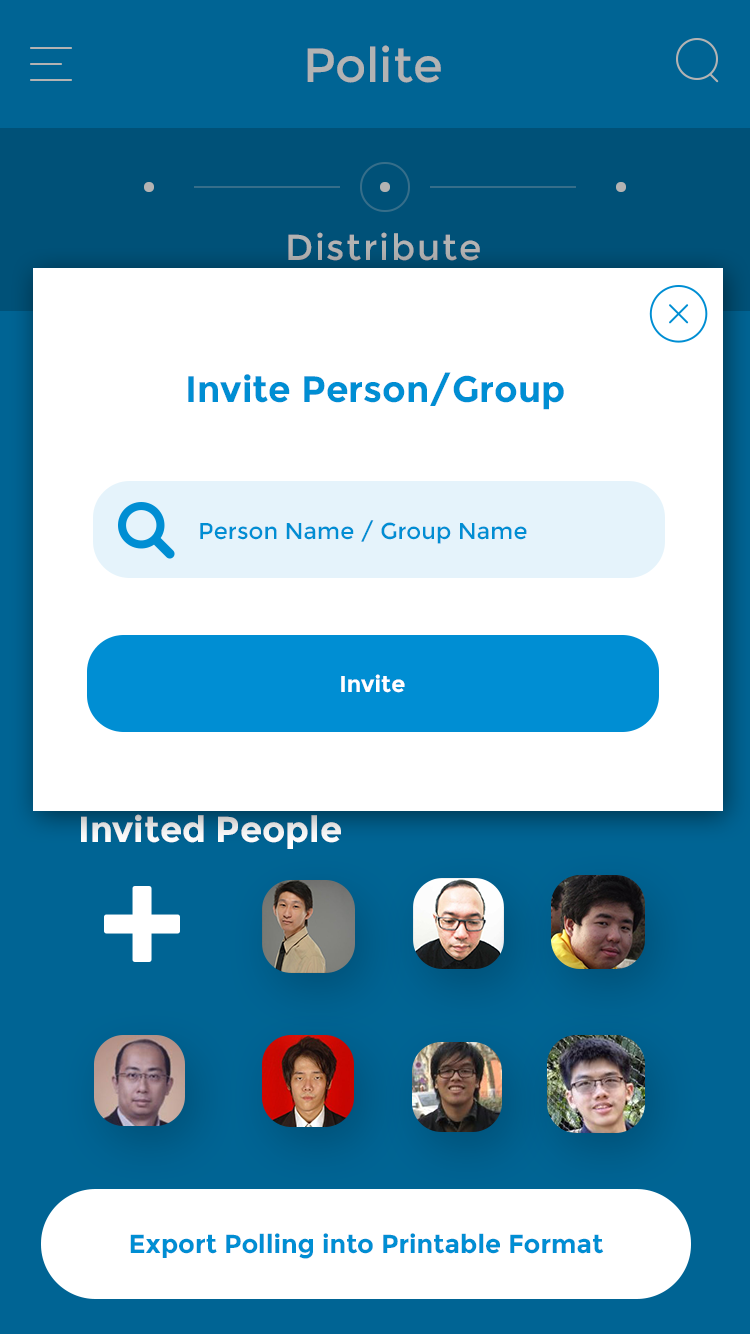
<style>
.page{position:relative;width:750px;height:1334px;background:#ffffff}
.page>*{position:absolute;margin:0}
.t1{font:48px "Montserrat-Regular";color:#b3b3b3}
.t2{font:36px "Montserrat-Regular";letter-spacing:0.05em;color:#b1b1b1}
.t3{font:36.6px "Montserrat-Bold";color:#008ed3}
.t4{font:22.9px "Montserrat-Regular";color:#008ed3}
.t5{font:22.9px "Montserrat-Bold";color:#ffffff}
.t6{font:36px "Montserrat-Bold";color:#ffffff}
.t7{font:26px "Montserrat-Bold";color:#008ed3}
</style>
<div class="page">
<p class="t1" style="left:307px;top:45px;width:134px;height:38px">Polite</p>
<p class="t2" style="left:288px;top:232px;width:192px;height:29px">Distribute</p>
<p class="t3" style="left:188px;top:372px;width:376px;height:38px">Invite Person/Group</p>
<p class="t4" style="left:200px;top:520px;width:327px;height:24px">Person Name / Group Name</p>
<p class="t5" style="left:341px;top:674px;width:64px;height:19px">Invite</p>
<p class="t6" style="left:81px;top:814px;width:260px;height:35px">Invited People</p>
<p class="t7" style="left:130px;top:1233px;width:474px;height:26px">Export Polling into Printable Format</p>
</div>
